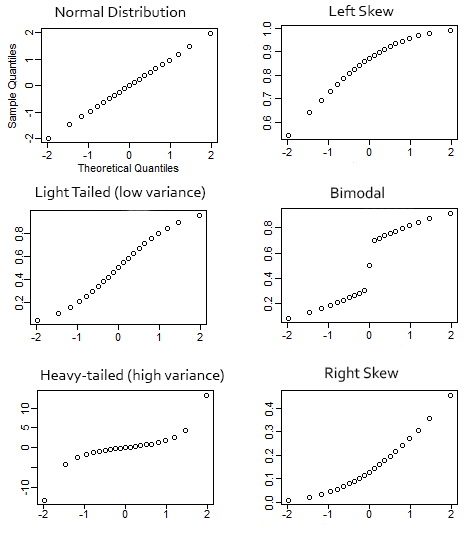
<style>
.page{position:relative;width:468px;height:537px;background:#ffffff}
.page>*{position:absolute;margin:0}
.t1{font:12px "Corbel";color:#090909}
</style>
<div class="page">
<p class="t1" style="left:55px;top:6px;width:131px;height:11px">Normal Distribution</p>
<p class="t1" style="left:329px;top:5px;width:65px;height:11px">Left Skew</p>
<p class="t1" style="left:36px;top:186px;width:169px;height:14px">Light Tailed (low variance)</p>
<p class="t1" style="left:331px;top:186px;width:53px;height:13px">Bimodal</p>
<p class="t1" style="left:325px;top:366px;width:74px;height:16px">Right Skew</p>
<p class="t1" style="left:41px;top:369px;width:183px;height:14px">Heavy-tailed (high variance)</p>
</div>
